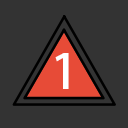
<style>
.page{position:relative;width:128px;height:128px;background:#333333}
.page>*{position:absolute;margin:0}
.t1{font:48px "AdobeHeitiStd-Regular";color:#ffffff}
</style>
<div class="page">
<p class="t1" style="left:55px;top:53px;width:14px;height:36px">1</p>
</div>
